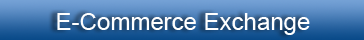
<style>
.page{position:relative;width:364px;height:40px}
.page>*{position:absolute;margin:0}
.t1{font:24px "ArialMT";color:#ffffff}
</style>
<div class="page">
<p class="t1" style="left:57px;top:13px;width:253px;height:22px">E-Commerce Exchange</p>
</div>
